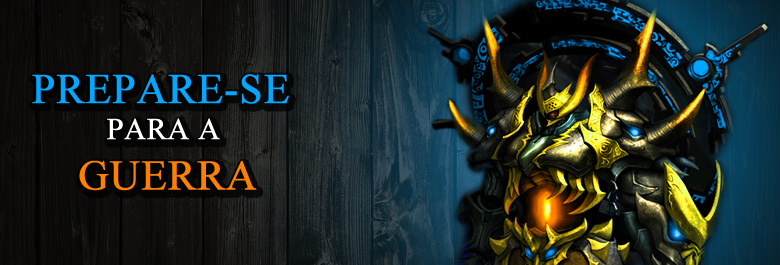
<style>
.page{position:relative;width:780px;height:265px}
.page>*{position:absolute;margin:0}
.t1{font:42px "TimesNewRomanPSMT";text-transform:uppercase;font-weight:bold}
.t2{font:30px "TimesNewRomanPSMT";text-transform:uppercase;font-weight:bold}
</style>
<div class="page">
<p class="t1" style="left:32px;top:74px;width:257px;height:117px;text-align:center">Prepare-se <br><span class="t2">para a <br></span>GUERRA</p>
</div>
